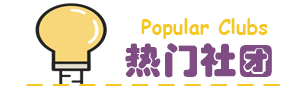
<style>
.page{position:relative;width:300px;height:110px;background:#ffffff}
.page>*{position:absolute;margin:0}
.t1{font:20px "ComicSansMS-Bold";color:#f4c821}
.t2{font:35.9px "STHupo";color:#7f4c83;scale:1.04 1}
</style>
<div class="page">
<p class="t1" style="left:141px;top:18px;width:127px;height:21px">Popular Clubs</p>
<p class="t2" style="left:125px;top:43px;width:147px;height:35px">热门社团</p>
<p class="t1" style="left:26px;top:84px;width:254px;height:2px">— — — — — — — — — —</p>
</div>
